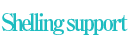
<style>
.page{position:relative;width:129px;height:43px;background:#ffffff}
.page>*{position:absolute;margin:0}
.t1{font:24px "RyuminPro-ExBold";letter-spacing:-0.125em;color:#1dbcc0;scale:0.9 1}
</style>
<div class="page">
<p class="t1" style="left:1px;top:13px;width:127px;height:22px">Shelling support</p>
</div>
